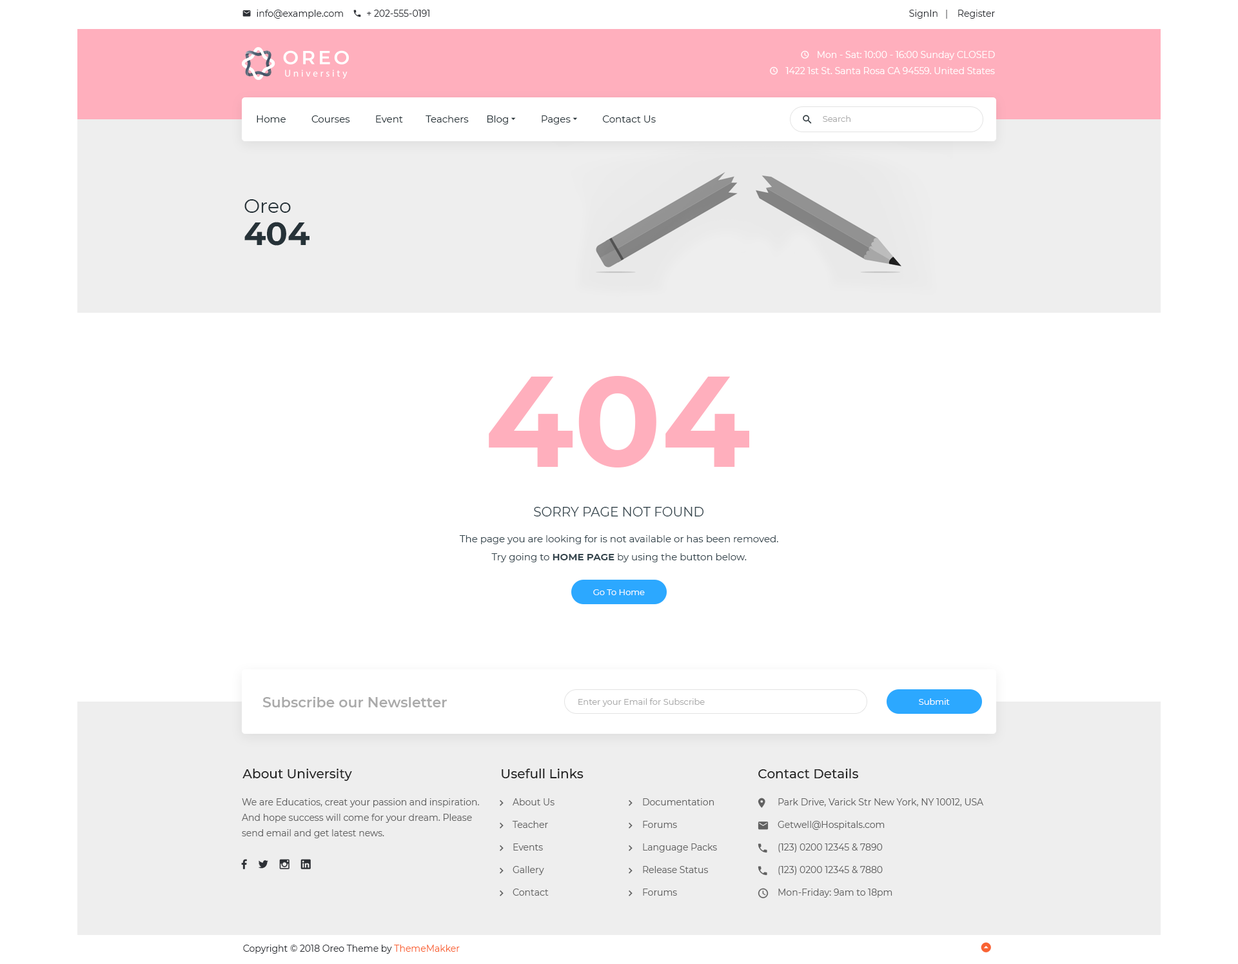
<style>
.page{position:relative;width:1238px;height:964px;background:#ffffff}
.page>*{position:absolute;margin:0}
.t1{font:9px "Montserrat-Regular";color:#2d3035}
.t2{font:8.4px "Montserrat-Regular";color:#aaaaaa}
.t3{font:19.3px "Montserrat-Regular";color:#263238}
.t4{font:32.2px/32.2px "Montserrat-Bold";color:#263238}
.t5{font:128.9px "Montserrat-Bold";color:#ffafbd}
.t6{font:12.9px "Montserrat-Regular";color:#37474f}
.t7{font:9.7px/18px "Montserrat-Regular";color:#37474f}
.t8{font:9.7px/18px "Montserrat-Bold";color:#37474f}
.t9{font:8.4px "Montserrat-Regular";color:#ffffff}
.t10{font:14.2px "Montserrat-SemiBold";color:#aaaaaa}
.t11{font:12.9px "Montserrat-Medium";color:#212121}
.t12{font:9px/15.5px "Montserrat-Regular";color:#616161}
.t13{font:9px/22.6px "Montserrat-Regular";color:#616161}
.t14{font:9px "Montserrat-Regular";color:#f96332}
</style>
<div class="page">
<p class="t1" style="left:909px;top:10px;width:86px;height:9px">SignIn   |    Register</p>
<p class="t2" style="left:822px;top:115px;width:28px;height:7px">Search</p>
<p class="t3" style="left:244px;top:199px;width:65px;height:47px">Oreo<br><span class="t4">404</span></p>
<p class="t5" style="left:489px;top:376px;width:260px;height:91px">404</p>
<p class="t6" style="left:534px;top:507px;width:170px;height:9px">SORRY PAGE NOT FOUND</p>
<p class="t7" style="left:459px;top:535px;width:319px;height:27px;text-align:center">The page you are looking for is not available or has been removed.<br>Try going to <span class="t8">HOME PAGE</span> by using the button below.</p>
<p class="t9" style="left:593px;top:589px;width:52px;height:6px">Go To Home</p>
<p class="t10" style="left:262px;top:696px;width:185px;height:11px">Subscribe our Newsletter</p>
<p class="t2" style="left:578px;top:698px;width:126px;height:8px">Enter your Email for Subscribe</p>
<p class="t9" style="left:918px;top:698px;width:31px;height:6px">Submit</p>
<p class="t11" style="left:242px;top:768px;width:110px;height:13px">About University</p>
<p class="t11" style="left:501px;top:768px;width:82px;height:10px">Usefull Links</p>
<p class="t11" style="left:758px;top:768px;width:100px;height:10px">Contact Details</p>
<p class="t12" style="left:241px;top:798px;width:238px;height:40px">We are Educatios, creat your passion and inspiration. And hope success will come for your dream. Please send email and get latest news.</p>
<p class="t13" style="left:512px;top:798px;width:42px;height:97px">About Us<br>Teacher<br>Events<br>Gallery<br>Contact</p>
<p class="t13" style="left:643px;top:798px;width:74px;height:97px">Documentation<br>Forums<br>Language Packs<br>Release Status<br>Forums</p>
<p class="t13" style="left:777px;top:798px;width:207px;height:99px">Park Drive, Varick Str New York, NY 10012, USA<br>Getwell@Hospitals.com<br>(123) 0200 12345 &amp; 7890<br>(123) 0200 12345 &amp; 7880<br>Mon-Friday: 9am to 18pm</p>
<p class="t1" style="left:243px;top:944px;width:217px;height:9px">Copyright © 2018 Oreo Theme by <span class="t14">ThemeMakker</span></p>
</div>
